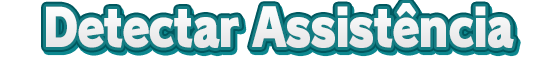
<style>
.page{position:relative;width:560px;height:66px;background:#ffffff}
.page>*{position:absolute;margin:0}
.t1{font:52px "RodinPro-UB";letter-spacing:-0.039em;color:#efeff0;scale:0.86 1}
</style>
<div class="page">
<p class="t1" style="left:46px;top:3px;width:468px;height:45px">Detectar Assistência</p>
</div>
